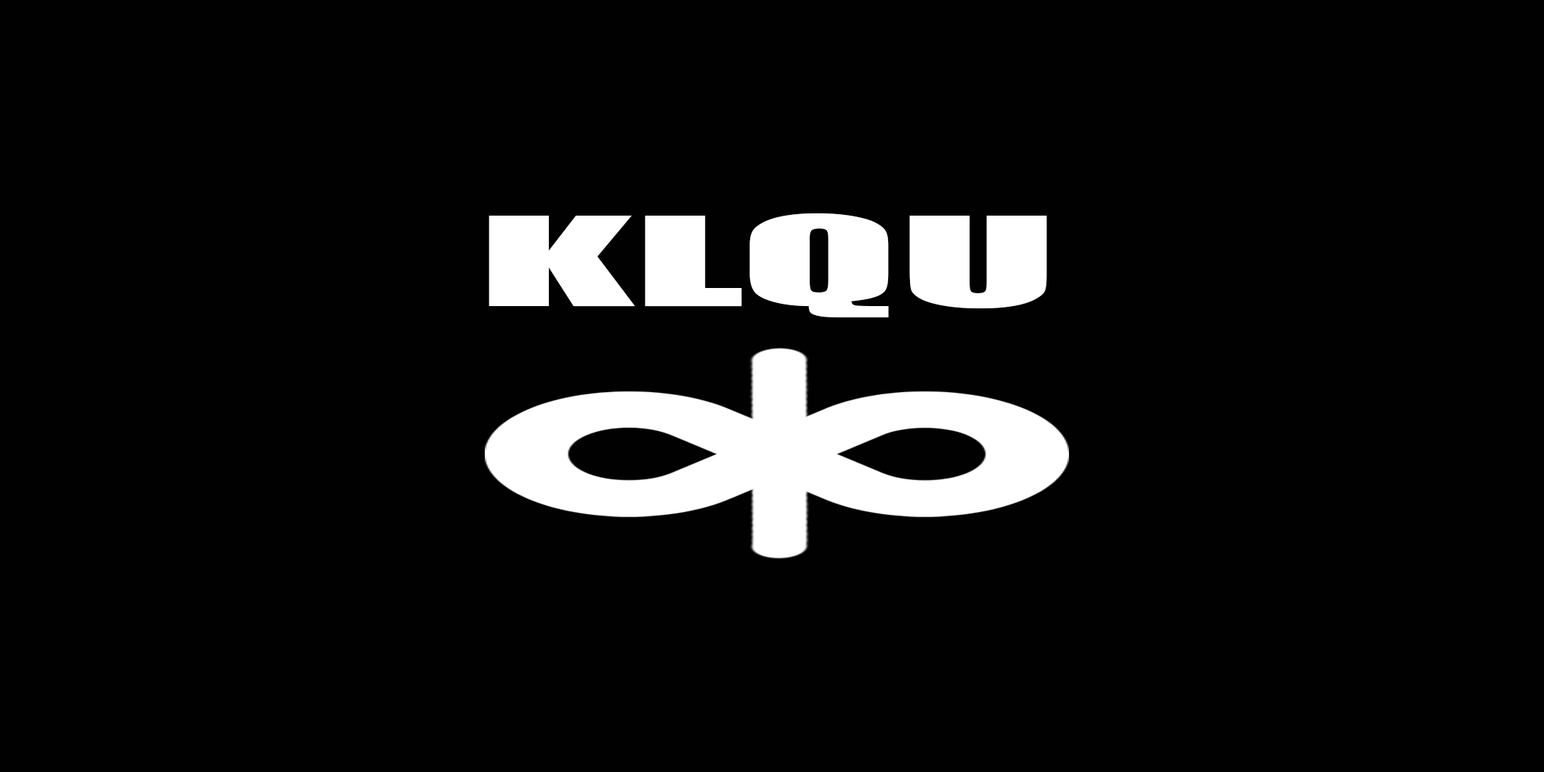
<style>
.page{position:relative;width:1544px;height:772px;background:#010101}
.page>*{position:absolute;margin:0}
.t1{font:114.8px "Impact";color:#ffffff;scale:2.54 1}
</style>
<div class="page">
<p class="t1" style="left:489px;top:213px;width:558px;height:104px">KLQU</p>
</div>
